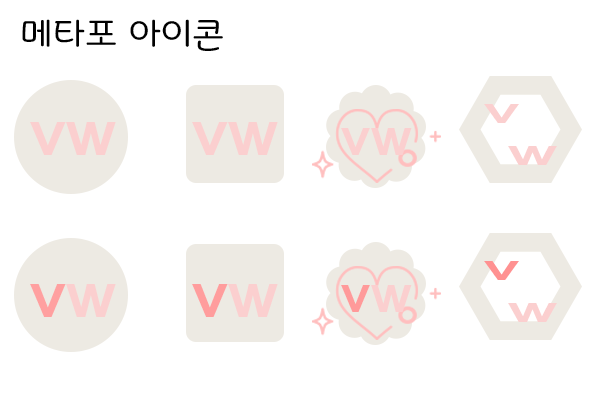
<style>
.page{position:relative;width:600px;height:400px;background:#ffffff}
.page>*{position:absolute;margin:0}
.t1{font:33px "Binggrae";color:#000000}
.t2{font:34.2px "ExpoM-HM";color:#fbcfcf;scale:1.7 1}
.t3{font:59px "ExpoM-HM";color:#fbcfcf}
.t4{font:48px "ExpoM-HM";color:#fbcfcf}
.t5{font:34.2px "ExpoM-HM";color:#ff9191;scale:1.7 1}
.t6{font:59px "ExpoM-HM";color:#ffa0a0}
.t7{font:59px "ExpoM-HM";color:#ff9d9d}
.t8{font:48px "ExpoM-HM";color:#ff9a9a}
</style>
<div class="page">
<p class="t1" style="left:22px;top:19px;width:201px;height:32px">메타포 아이콘</p>
<p class="t2" style="left:484px;top:104px;width:73px;height:61px">v<br> w</p>
<p class="t3" style="left:30px;top:122px;width:86px;height:33px">vw</p>
<p class="t3" style="left:192px;top:122px;width:86px;height:33px">vw</p>
<p class="t4" style="left:341px;top:128px;width:71px;height:27px">vw</p>
<p class="t5" style="left:484px;top:261px;width:73px;height:61px">v<br><span class="t2"> w</span></p>
<p class="t6" style="left:30px;top:284px;width:86px;height:33px">v<span class="t3">w</span></p>
<p class="t7" style="left:192px;top:284px;width:86px;height:33px">v<span class="t3">w</span></p>
<p class="t8" style="left:341px;top:285px;width:71px;height:27px">v<span class="t4">w</span></p>
</div>
